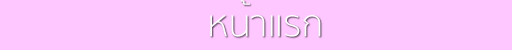
<style>
.page{position:relative;width:512px;height:50px;background:#ffc7ff}
.page>*{position:absolute;margin:0}
.t1{font:37.6px "SukhumvitSet-Thin";color:#ffffff}
</style>
<div class="page">
<p class="t1" style="left:210px;top:0px;width:111px;height:37px">หน้าแรก</p>
</div>
